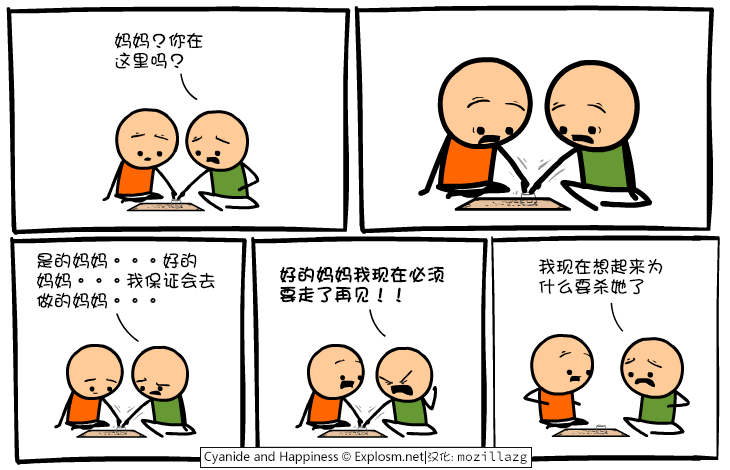
<style>
.page{position:relative;width:730px;height:470px;background:#ffffff}
.page>*{position:absolute;margin:0}
.t1{font:18px/20px "DFGirl";color:#000000}
.t2{font:18px/20px "DFGirl";color:#000000;font-weight:bold}
</style>
<div class="page">
<p class="t1" style="left:115px;top:32px;width:88px;height:37px">妈妈？你在<br>这里吗？</p>
<p class="t1" style="left:36px;top:252px;width:179px;height:57px">是的妈妈。。。好的<br>妈妈。。。我保证会去<br>做的妈妈。。。</p>
<p class="t2" style="left:280px;top:266px;width:164px;height:37px">好的妈妈我现在必须<br>要走了再见！！</p>
<p class="t1" style="left:538px;top:258px;width:125px;height:37px">我现在想起来为<br>什么要杀她了</p>
</div>
